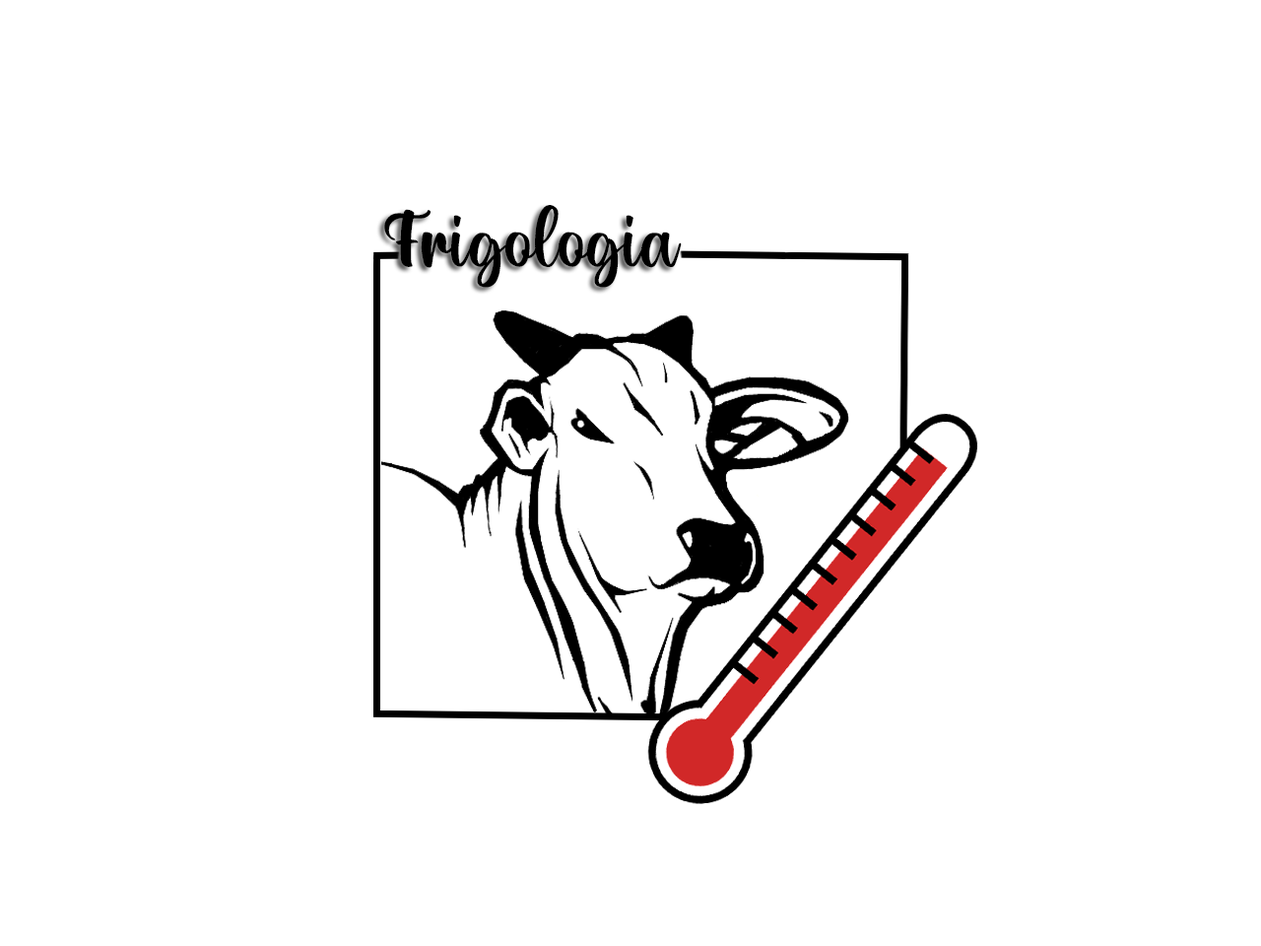
<style>
.page{position:relative;width:1261px;height:946px;background:#ffffff}
.page>*{position:absolute;margin:0}
.t1{font:88.7px "HelloValentica-Regular";color:#000000}
</style>
<div class="page">
<p class="t1" style="left:384px;top:205px;width:298px;height:83px">Frigologia</p>
</div>
